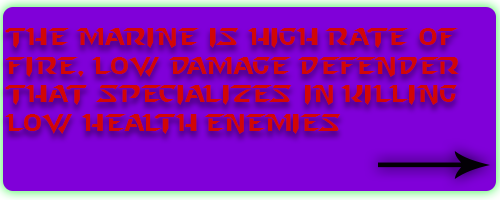
<style>
.page{position:relative;width:500px;height:200px;background:#8000d9}
.page>*{position:absolute;margin:0}
.t1{font:24px "StarcraftNormal";color:#d20606}
</style>
<div class="page">
<p class="t1" style="left:5px;top:28px;width:454px;height:106px">The marine is high rate of fire, low damage defender that specializes in killing low health enemies</p>
</div>
